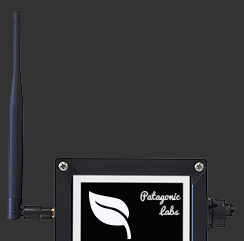
<style>
.page{position:relative;width:244px;height:241px;background:#333333}
.page>*{position:absolute;margin:0}
.t1{font:10px "Pacifico-Regular";color:#e1e1e1}
</style>
<div class="page">
<p class="t1" style="left:140px;top:190px;width:41px;height:15px">Patagonic</p>
<p class="t1" style="left:159px;top:205px;width:21px;height:11px">Labs</p>
</div>
